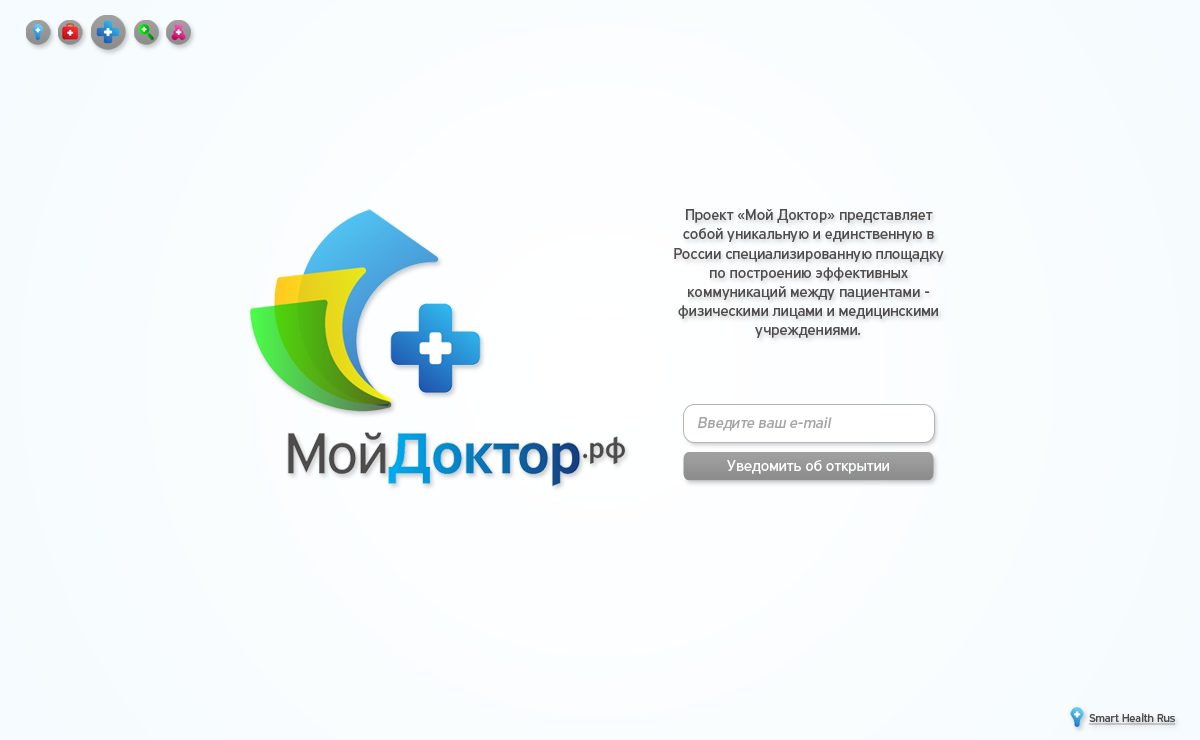
<style>
.page{position:relative;width:1200px;height:740px}
.page>*{position:absolute;margin:0}
.t1{font:16px "PFHighwaySansPro-Regular";color:#4f4c4c}
.t2{font:16px "PFHighwaySansPro-Regular";color:#a4a4a4;font-style:italic}
.t3{font:16px "PFHighwaySansPro-Regular";color:#fcfeff}
.t4{font:12px "PFHighwaySansPro-Regular";color:#4f4c4c;text-decoration:underline}
</style>
<div class="page">
<p class="t1" style="left:674px;top:209px;width:270px;height:129px;text-align:center">Проект «Мой Доктор» представляет собой уникальную и единственную в России специализированную площадку по построению эффективных коммуникаций между пациентами - физическими лицами и медицинскими учреждениями.</p>
<p class="t2" style="left:698px;top:417px;width:134px;height:14px">Введите ваш e-mail</p>
<p class="t3" style="left:727px;top:460px;width:162px;height:14px">Уведомить об открытии</p>
<p class="t4" style="left:1088px;top:713px;width:88px;height:12px">Smart Health Rus</p>
</div>
